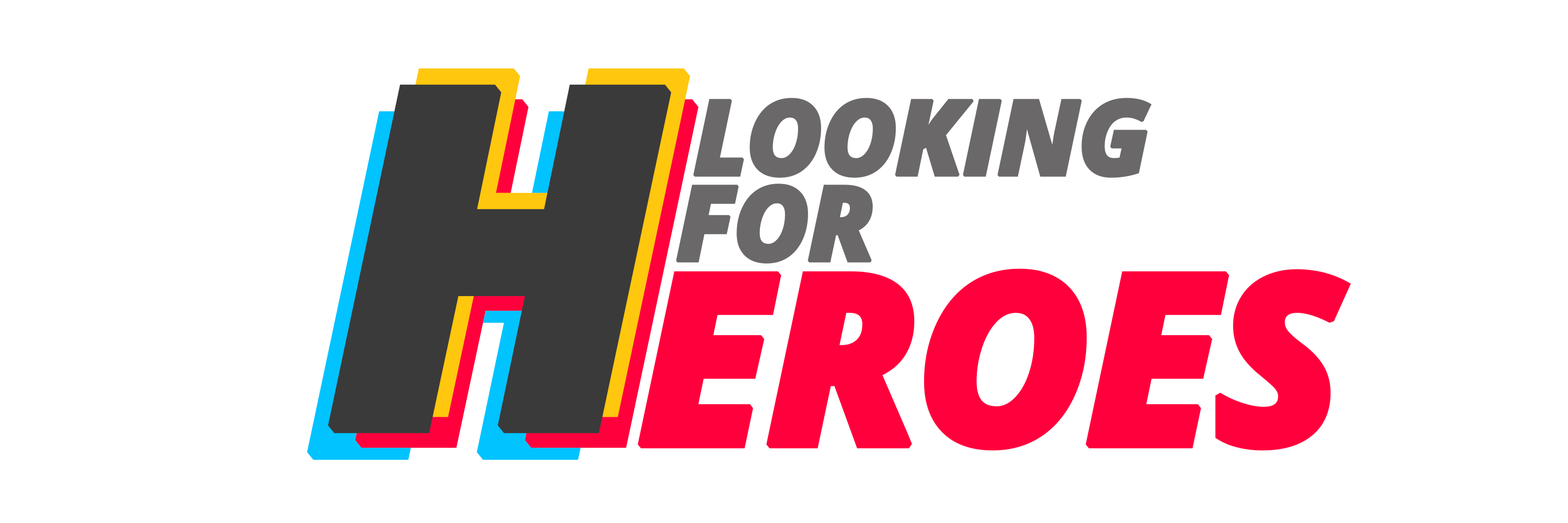
<style>
.page{position:relative;width:1568px;height:523px;background:#ffffff}
.page>*{position:absolute;margin:0}
.t1{font:470.5px "OpenSans-ExtraboldItalic";letter-spacing:-0.05em;color:#3a3a3a;font-weight:bold}
.t2{font:104.5px "OpenSans-ExtraboldItalic";letter-spacing:-0.05em;color:#6a6868;font-weight:bold}
.t3{font:238.4px "OpenSans-ExtraboldItalic";letter-spacing:-0.05em;color:#ff003c;font-weight:bold}
</style>
<div class="page">
<p class="t1" style="left:347px;top:68px;width:343px;height:349px">H</p>
<p class="t1" style="left:328px;top:84px;width:344px;height:349px">H</p>
<p class="t1" style="left:355px;top:99px;width:344px;height:349px">H</p>
<p class="t2" style="left:693px;top:98px;width:459px;height:80px">LOOKING</p>
<p class="t1" style="left:307px;top:111px;width:344px;height:349px">H</p>
<p class="t2" style="left:676px;top:183px;width:197px;height:80px">FOR</p>
<p class="t3" style="left:638px;top:268px;width:713px;height:183px">EROES</p>
</div>
